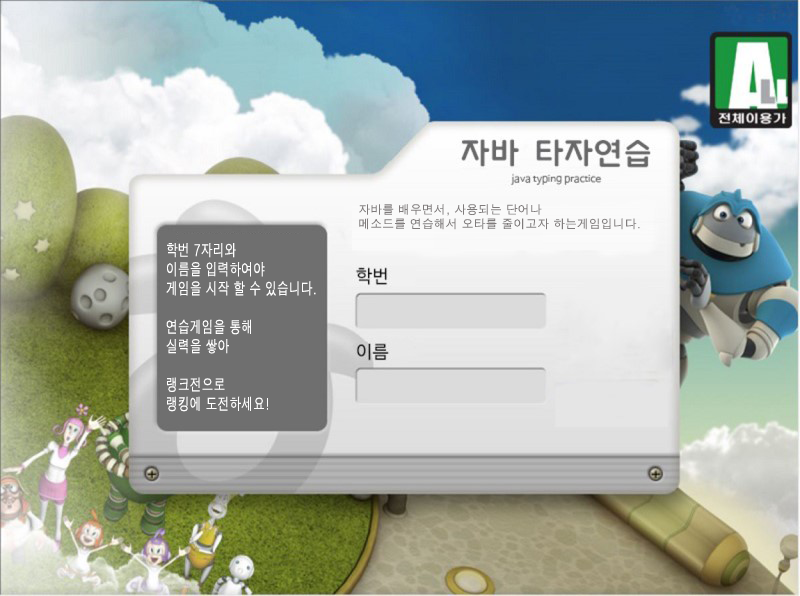
<style>
.page{position:relative;width:800px;height:596px}
.page>*{position:absolute;margin:0}
.t1{font:11.9px "H2gtrM";color:#7f7b7b}
.t2{font:16px "H2gtrM";color:#ffffff;scale:0.74 1}
</style>
<div class="page">
<p class="t1" style="left:359px;top:204px;width:281px;height:26px">자바를 배우면서, 사용되는 단어나<br>메소드를 연습해서 오타를 줄이고자 하는게임입니다.</p>
<p class="t2" style="left:166px;top:243px;width:150px;height:169px">학번 7자리와<br>이름을 입력하여야<br>게임을 시작 할 수 있습니다.<br><br>연습게임을 통해<br>실력을 쌓아<br><br>랭크전으로<br>랭킹에 도전하세요!</p>
</div>
